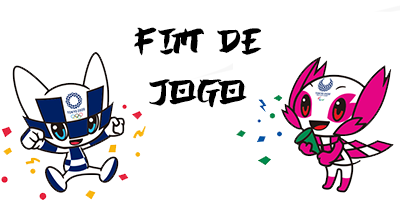
<style>
.page{position:relative;width:400px;height:200px;background:#ffffff}
.page>*{position:absolute;margin:0}
.t1{font:42.4px "JAPANBRUSH";color:#000000}
</style>
<div class="page">
<p class="t1" style="left:134px;top:27px;width:128px;height:81px;text-align:center">fim de jogo</p>
</div>
